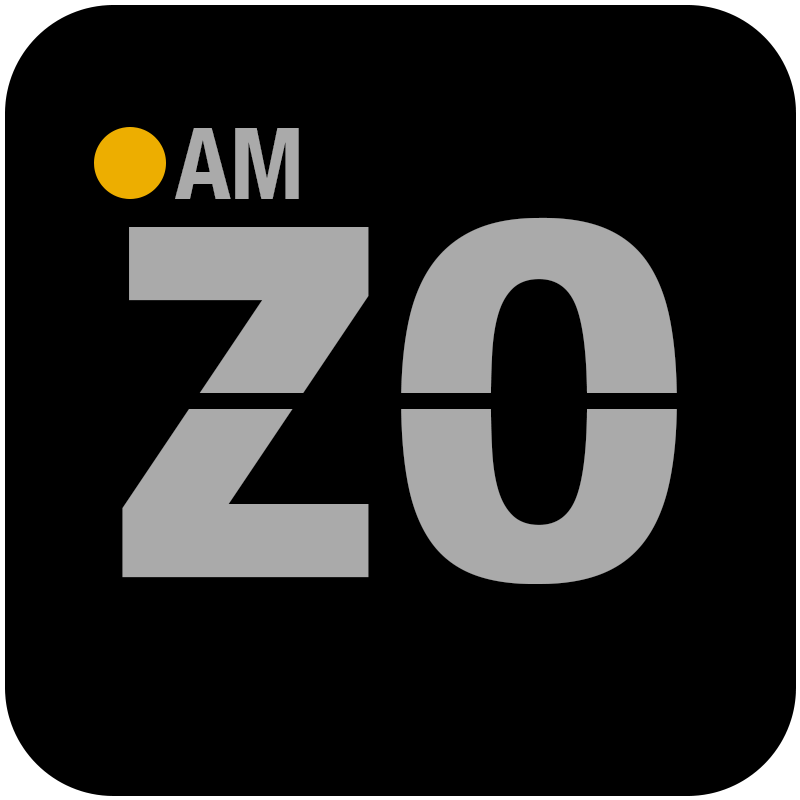
<style>
.page{position:relative;width:800px;height:800px;background:#000000}
.page>*{position:absolute;margin:0}
.t1{font:100px "HelveticaNeueBoldCondensed";color:#aaaaaa}
.t2{font:650px "HelveticaNeueBoldCondensed";color:#aaaaaa}
</style>
<div class="page">
<p class="t1" style="left:175px;top:128px;width:124px;height:71px">AM</p>
<p class="t2" style="left:122px;top:217px;width:555px;height:367px">zo</p>
</div>
